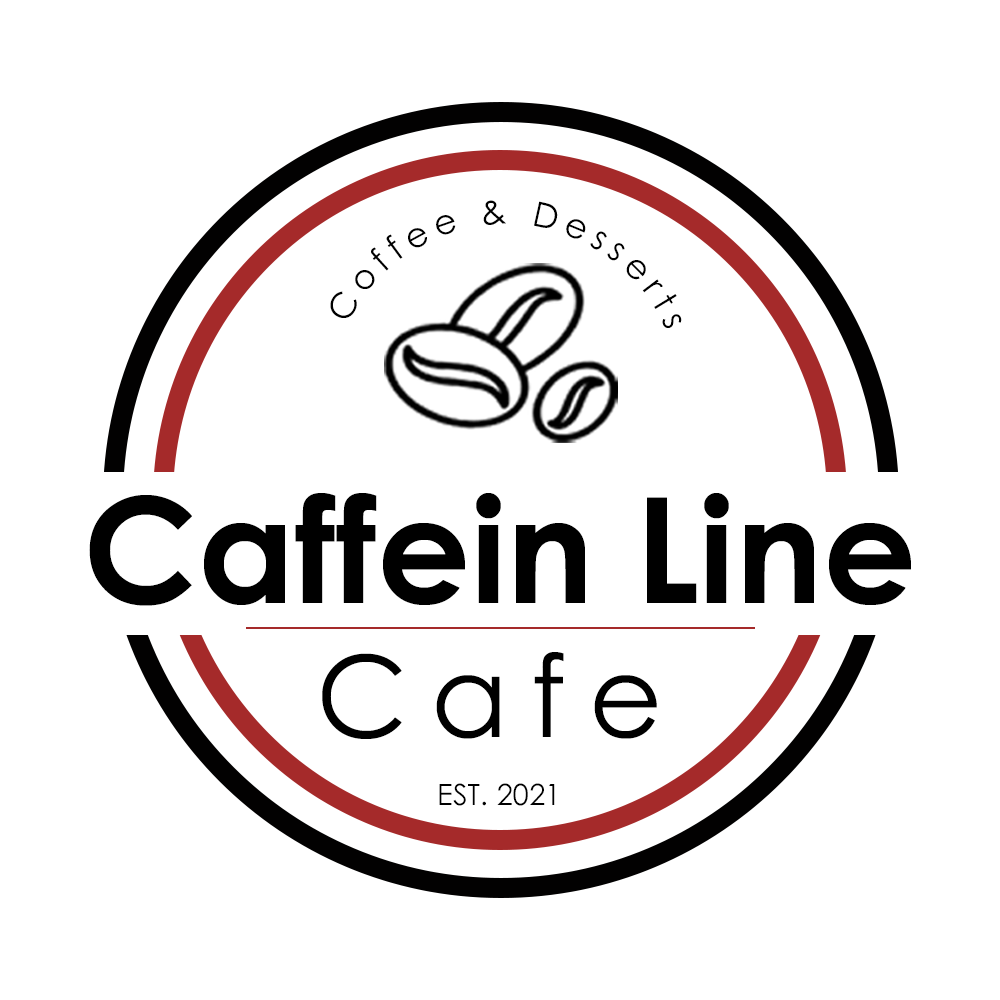
<style>
.page{position:relative;width:1000px;height:1000px;background:#ffffff}
.page>*{position:absolute;margin:0}
.t1{font:34.3px "CenturyGothic";letter-spacing:0.2em;color:#000000}
.t2{font:146.7px "CenturyGothic-Bold";color:#000000}
.t3{font:113.2px "CenturyGothic";letter-spacing:0.2em;color:#000000}
.t4{font:29.3px "CenturyGothic";color:#000000}
</style>
<div class="page">
<p class="t1" style="left:330px;top:200px;width:352px;height:128px;rotate:-20deg">Coffee &amp; Desserts</p>
<p class="t2" style="left:89px;top:493px;width:822px;height:113px">Caffein Line</p>
<p class="t3" style="left:322px;top:652px;width:335px;height:87px">Cafe</p>
<p class="t4" style="left:439px;top:783px;width:116px;height:23px">EST. 2021</p>
</div>
